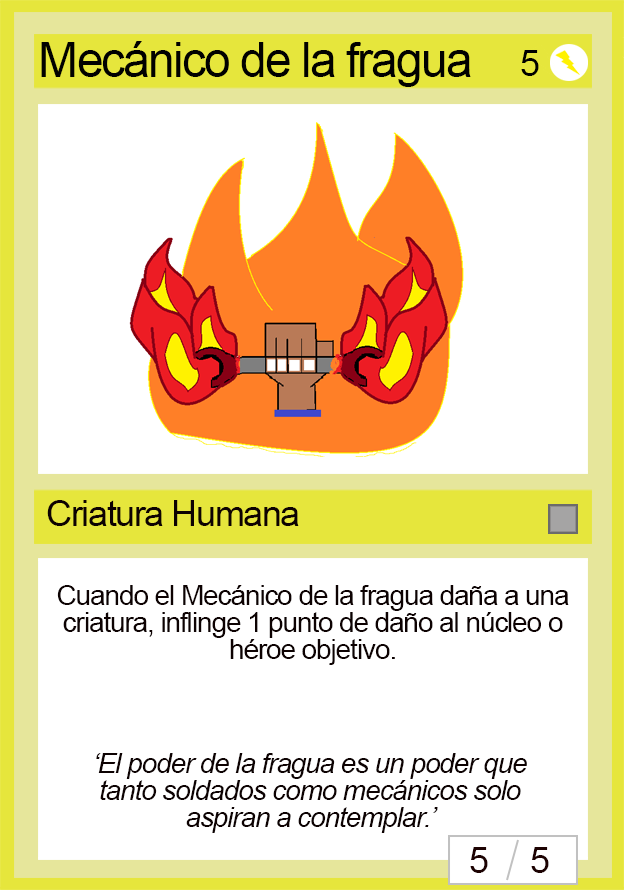
<style>
.page{position:relative;width:624px;height:890px;background:#ffffff}
.page>*{position:absolute;margin:0}
.t1{font:48px "ArialMT";letter-spacing:-0.04em;color:#010100}
.t2{font:36px "ArialMT";letter-spacing:-0.04em;color:#000000}
.t3{font:36px "ArialMT";letter-spacing:-0.04em;color:#0d0202}
.t4{font:28px/27px "ArialMT";letter-spacing:-0.04em;color:#0d0202}
.t5{font:28px/27px "Arial-ItalicMT";letter-spacing:-0.04em;color:#0d0202}
.t6{font:36px "ArialMT";letter-spacing:-0.04em;color:#1d0202}
</style>
<div class="page">
<p class="t1" style="left:41px;top:41px;width:430px;height:46px">Mecánico de la fragua</p>
<p class="t2" style="left:521px;top:50px;width:18px;height:26px">5</p>
<p class="t3" style="left:47px;top:500px;width:252px;height:26px">Criatura Humana</p>
<p class="t4" style="left:57px;top:585px;width:512px;height:80px;text-align:center">Cuando el Mecánico de la fragua daña a una criatura, inflinge 1 punto de daño al núcleo o héroe objetivo.</p>
<p class="t5" style="left:96px;top:753px;width:431px;height:80px;text-align:center">‘El poder de la fragua es un poder que tanto soldados como mecánicos solo aspiran a contemplar.’</p>
<p class="t6" style="left:470px;top:847px;width:18px;height:26px">5</p>
<p class="t6" style="left:531px;top:847px;width:18px;height:26px">5</p>
</div>
